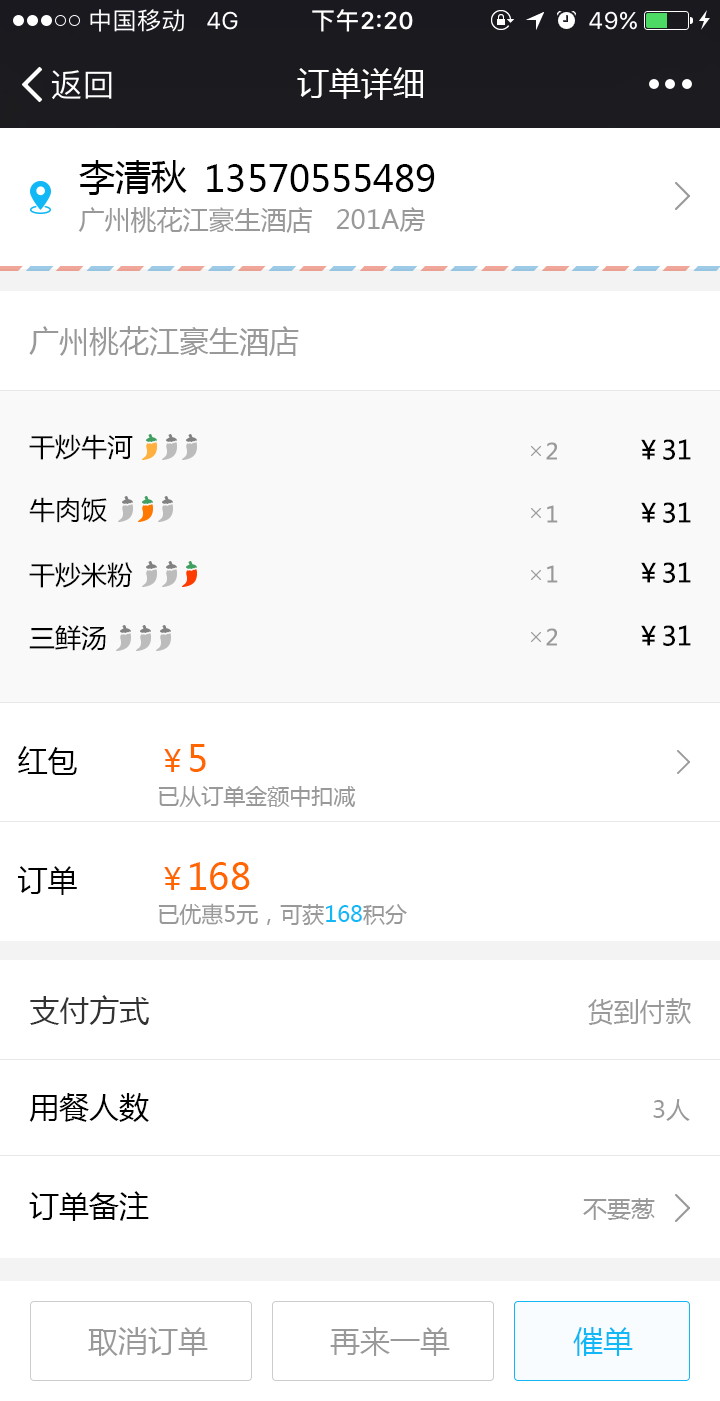
<style>
.page{position:relative;width:720px;height:1401px;background:#ffffff}
.page>*{position:absolute;margin:0}
.t1{font:32px "MicrosoftYaHei";color:#ffffff}
.t2{font:36px "MicrosoftYaHei";color:#000000}
.t3{font:26px "MicrosoftYaHei";color:#999999}
.t4{font:30px "MicrosoftYaHei";color:#999999}
.t5{font:26px "MicrosoftYaHei";color:#000000}
.t6{font:22px "MicrosoftYaHei";color:#999999}
.t7{font:30px "MicrosoftYaHei";color:#000000}
.t8{font:22px/44px "MicrosoftYaHei";color:#999999}
.t9{font:30px/44px "MicrosoftYaHei";color:#ff6600}
.t10{font:36px/44px "MicrosoftYaHei";color:#ff6600}
.t11{font:22px/44px "MicrosoftYaHei";color:#12b7f5}
.t12{font:30px "MicrosoftYaHei";color:#333333}
.t13{font:24px "MicrosoftYaHei";color:#999999}
.t14{font:30px "MicrosoftYaHei";color:#12b7f5}
</style>
<div class="page">
<p class="t1" style="left:297px;top:67px;width:126px;height:33px">订单详细</p>
<p class="t2" style="left:79px;top:160px;width:108px;height:35px">李清秋</p>
<p class="t2" style="left:207px;top:164px;width:228px;height:28px">13570555489</p>
<p class="t3" style="left:78px;top:207px;width:347px;height:26px">广州桃花江豪生酒店   201A房</p>
<p class="t4" style="left:29px;top:326px;width:270px;height:30px">广州桃花江豪生酒店</p>
<p class="t5" style="left:29px;top:434px;width:104px;height:26px">干炒牛河</p>
<p class="t6" style="left:546px;top:442px;width:11px;height:18px">2</p>
<p class="t5" style="left:641px;top:439px;width:50px;height:21px">￥31</p>
<p class="t5" style="left:29px;top:497px;width:78px;height:26px">牛肉饭</p>
<p class="t6" style="left:547px;top:505px;width:11px;height:18px">1</p>
<p class="t5" style="left:641px;top:502px;width:50px;height:21px">￥31</p>
<p class="t5" style="left:29px;top:562px;width:104px;height:26px">干炒米粉</p>
<p class="t6" style="left:547px;top:565px;width:11px;height:18px">1</p>
<p class="t5" style="left:641px;top:562px;width:50px;height:21px">￥31</p>
<p class="t5" style="left:29px;top:625px;width:77px;height:26px">三鲜汤</p>
<p class="t6" style="left:546px;top:628px;width:11px;height:18px">2</p>
<p class="t5" style="left:641px;top:625px;width:50px;height:21px">￥31</p>
<p class="t7" style="left:18px;top:746px;width:59px;height:29px">红包</p>
<p class="t8" style="left:158px;top:744px;width:198px;height:63px"><span class="t9">￥</span><span class="t10">5<br></span>已从订单金额中扣减</p>
<p class="t7" style="left:18px;top:866px;width:59px;height:29px">订单</p>
<p class="t8" style="left:158px;top:862px;width:249px;height:63px"><span class="t9">￥</span><span class="t10">168<br></span>已优惠5元，可获<span class="t11">168</span>积分</p>
<p class="t12" style="left:30px;top:995px;width:119px;height:30px">支付方式</p>
<p class="t3" style="left:588px;top:998px;width:103px;height:27px">货到付款</p>
<p class="t7" style="left:29px;top:1093px;width:120px;height:29px">用餐人数</p>
<p class="t13" style="left:653px;top:1099px;width:37px;height:22px">3人</p>
<p class="t7" style="left:29px;top:1191px;width:120px;height:30px">订单备注</p>
<p class="t13" style="left:583px;top:1198px;width:72px;height:22px">不要葱</p>
<p class="t4" style="left:88px;top:1327px;width:120px;height:29px">取消订单</p>
<p class="t4" style="left:330px;top:1327px;width:120px;height:29px">再来一单</p>
<p class="t14" style="left:573px;top:1327px;width:60px;height:29px">催单</p>
</div>
